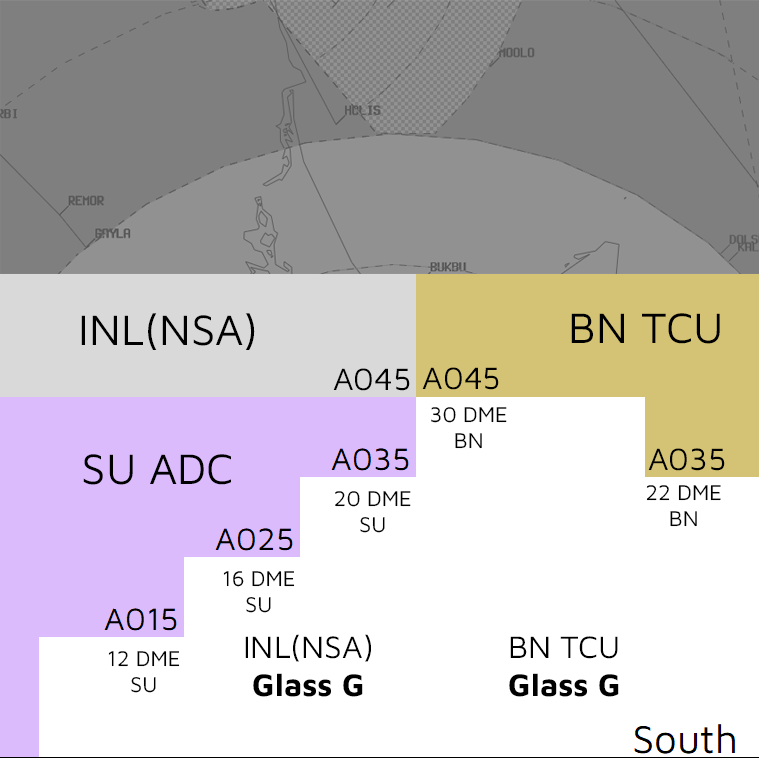
<style>
.page{position:relative;width:759px;height:767px;background:#ffffff}
.page>*{position:absolute;margin:0}
.t1{font:44px "MavenPro-Regular";color:#000000}
.t2{font:32px "MavenPro-Regular";color:#000000}
.t3{font:22px "MavenPro-Regular";color:#000000}
.t4{font:32px "MavenPro-Bold";color:#000000}
</style>
<div class="page">
<p class="t1" style="left:81px;top:313px;width:174px;height:37px">INL(NSA)</p>
<p class="t1" style="left:571px;top:313px;width:149px;height:31px">BN TCU</p>
<p class="t2" style="left:333px;top:368px;width:77px;height:23px">A045</p>
<p class="t2" style="left:422px;top:367px;width:77px;height:23px">A045</p>
<p class="t3" style="left:431px;top:407px;width:76px;height:42px;text-align:center">30 DME<br>BN</p>
<p class="t2" style="left:648px;top:448px;width:77px;height:23px">A035</p>
<p class="t1" style="left:83px;top:454px;width:148px;height:31px">SU ADC</p>
<p class="t3" style="left:646px;top:485px;width:75px;height:42px;text-align:center">22 DME<br>BN</p>
<p class="t3" style="left:335px;top:491px;width:76px;height:42px;text-align:center">20 DME<br>SU</p>
<p class="t3" style="left:223px;top:571px;width:72px;height:42px;text-align:center">16 DME<br>SU</p>
<p class="t2" style="left:245px;top:634px;width:126px;height:63px;text-align:center">INL(NSA)<br><span class="t4">Glass G</span></p>
<p class="t4" style="left:509px;top:636px;width:110px;height:61px;text-align:center"><span class="t2">BN TCU<br></span>Glass G</p>
<p class="t3" style="left:108px;top:651px;width:72px;height:42px;text-align:center">12 DME<br>SU</p>
</div>
